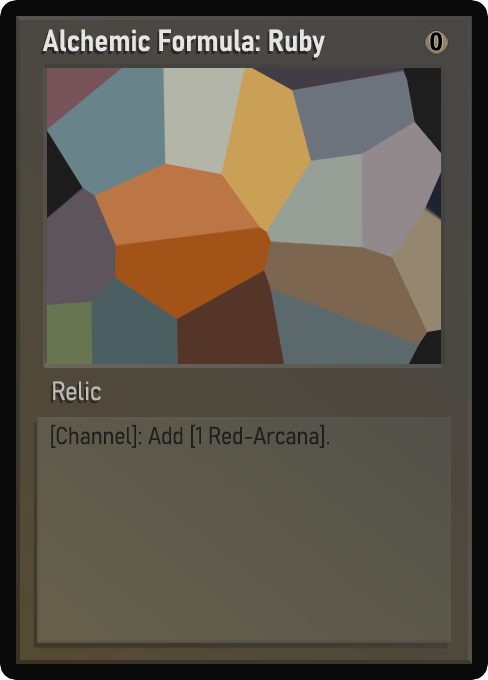
<style>
.page{position:relative;width:488px;height:680px}
.page>*{position:absolute;margin:0}
.t1{font:30px "Bahnschrift-SemiBoldSemiCondensed";color:#f2f2f2;font-weight:bold}
.t2{font:25px "WTRRoycroft";color:#000000;font-weight:bold;scale:1.09 1}
.t3{font:26px "Bahnschrift-LightSemiCondensed";color:#c8c8c8;font-weight:bold}
.t4{font:24px "Bahnschrift-LightSemiCondensed";color:#1e1e1e;font-weight:bold}
</style>
<div class="page">
<p class="t1" style="left:42px;top:29px;width:283px;height:29px;opacity:0.9">Alchemic Formula: Ruby</p>
<p class="t2" style="left:430px;top:32px;width:12px;height:19px">0</p>
<p class="t3" style="left:53px;top:381px;width:48px;height:20px;opacity:0.9">Relic</p>
<p class="t4" style="left:51px;top:424px;width:278px;height:24px">[Channel]: Add [1 Red-Arcana].</p>
</div>
